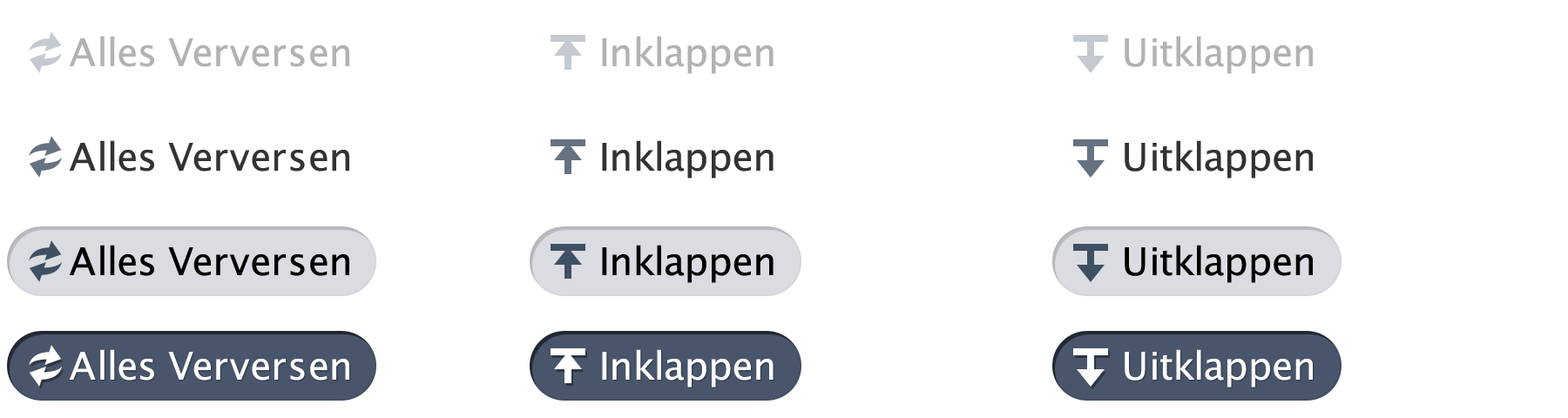
<style>
.page{position:relative;width:1568px;height:418px;background:#ffffff}
.page>*{position:absolute;margin:0}
.t1{font:38.3px "LucidaGrande";letter-spacing:-0.01em;color:#b2b2b2}
.t2{font:38.3px "LucidaGrande";letter-spacing:-0.01em;color:#333333}
.t3{font:38.3px "LucidaGrande";letter-spacing:-0.01em;color:#000000}
.t4{font:38.3px "LucidaGrande";letter-spacing:-0.01em;color:#ffffff}
</style>
<div class="page">
<p class="t1" style="left:69px;top:36px;width:280px;height:31px">Alles Verversen</p>
<p class="t1" style="left:602px;top:36px;width:172px;height:38px">Inklappen</p>
<p class="t1" style="left:1125px;top:36px;width:188px;height:38px">Uitklappen</p>
<p class="t2" style="left:69px;top:140px;width:280px;height:32px">Alles Verversen</p>
<p class="t2" style="left:602px;top:140px;width:172px;height:39px">Inklappen</p>
<p class="t2" style="left:1125px;top:140px;width:188px;height:39px">Uitklappen</p>
<p class="t3" style="left:69px;top:245px;width:280px;height:31px">Alles Verversen</p>
<p class="t3" style="left:602px;top:245px;width:172px;height:38px">Inklappen</p>
<p class="t3" style="left:1125px;top:245px;width:188px;height:38px">Uitklappen</p>
<p class="t4" style="left:69px;top:349px;width:280px;height:32px">Alles Verversen</p>
<p class="t4" style="left:602px;top:349px;width:172px;height:39px">Inklappen</p>
<p class="t4" style="left:1125px;top:349px;width:188px;height:39px">Uitklappen</p>
</div>
